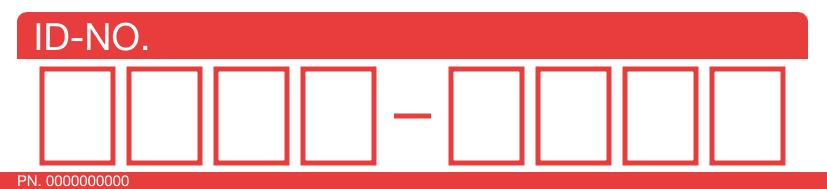
<style>
.page{position:relative;width:827px;height:189px;background:#ffffff}
.page>*{position:absolute;margin:0}
.t1{font:37.5px "HelveticaNeue";color:#ffffff}
.t2{font:15px "HelveticaNeue";color:#ffffff}
</style>
<div class="page">
<p class="t1" style="left:36px;top:22px;width:112px;height:29px">ID-NO.</p>
<p class="t2" style="left:18px;top:175px;width:111px;height:12px">PN. 0000000000</p>
</div>
